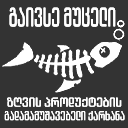
<style>
.page{position:relative;width:128px;height:128px;background:#333333}
.page>*{position:absolute;margin:0}
.t1{font:27px "ArchyEDT-Bold";color:#ffffff;scale:0.71 1}
.t2{font:13.2px "ArchyEDT-Bold";color:#ffffff;scale:1.09 1}
.t3{font:13.2px "ArchyEDT-Bold";color:#ffffff;scale:0.86 1}
</style>
<div class="page">
<p class="t1" style="left:9px;top:7px;width:107px;height:20px">გაივსე მუცელი</p>
<p class="t2" style="left:7px;top:97px;width:115px;height:10px">ზღვის პროდუქტების</p>
<p class="t3" style="left:4px;top:111px;width:121px;height:10px">გადამამუშავებელი ქარხანა</p>
</div>
